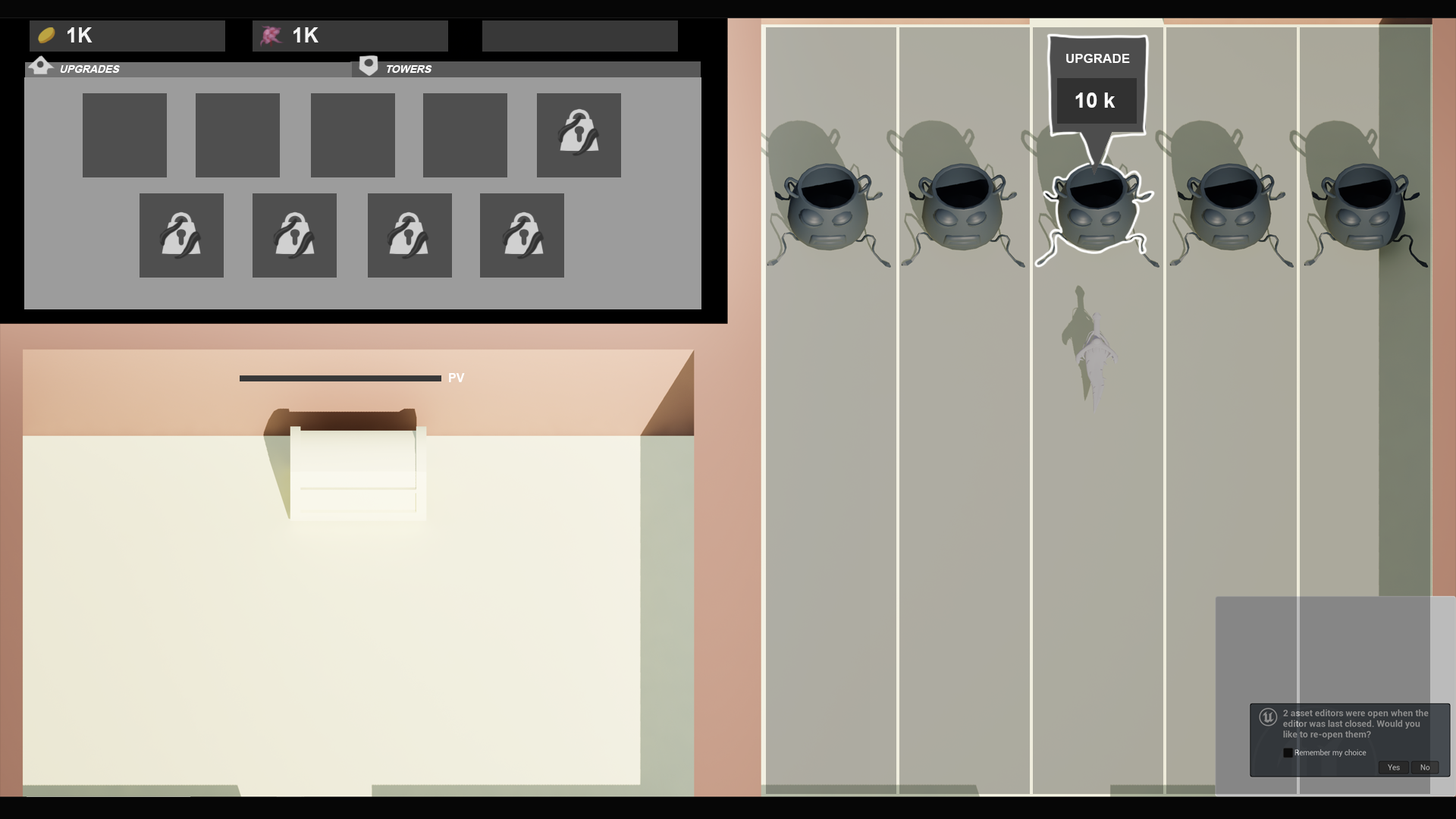
<style>
.page{position:relative;width:1456px;height:819px}
.page>*{position:absolute;margin:0}
.t1{font:20.7px "Arial-BoldMT";color:#f4f4f4}
.t2{font:12.9px "Arial-BoldMT";color:#ffffff}
.t3{font:10.9px "Arial-BoldMT";color:#ffffff;scale:0.97 1}
.t4{font:21.1px "Arial-BoldMT";color:#ffffff}
.t5{font:12.4px "Arial-BoldMT";color:#ffffff}
</style>
<div class="page">
<p class="t1" style="left:67px;top:27px;width:26px;height:15px">1K</p>
<p class="t1" style="left:293px;top:27px;width:25px;height:15px">1K</p>
<p class="t2" style="left:1066px;top:54px;width:64px;height:9px">UPGRADE</p>
<p class="t3" style="left:60px;top:65px;width:60px;height:8px">UPGRADES</p>
<p class="t3" style="left:387px;top:65px;width:45px;height:8px">TOWERS</p>
<p class="t4" style="left:1075px;top:93px;width:40px;height:15px">10 k</p>
<p class="t5" style="left:449px;top:373px;width:16px;height:9px">PV</p>
</div>
